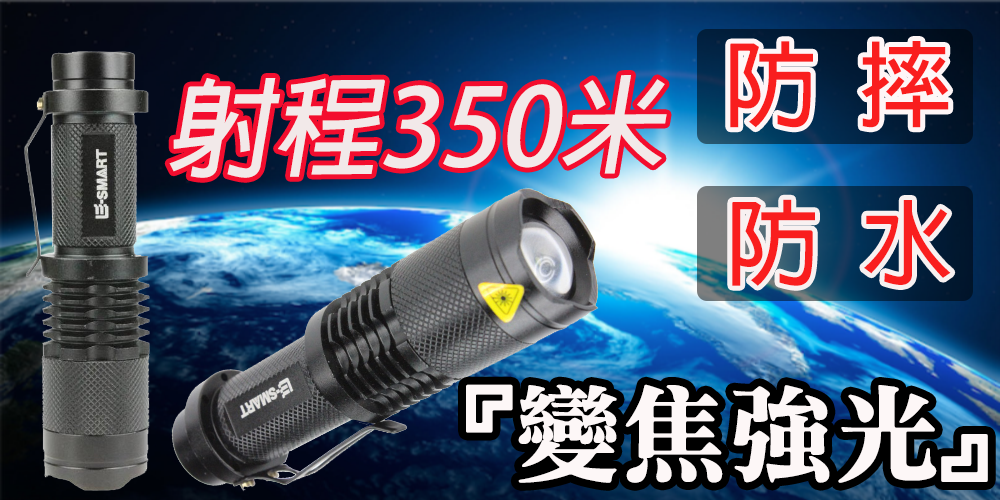
<style>
.page{position:relative;width:1000px;height:500px}
.page>*{position:absolute;margin:0}
.t1{font:93.3px "AdobeFanHeitiStd-Bold";color:#f91e1e}
.t2{font:106.6px "AdobeFanHeitiStd-Bold";color:#f2e9e9;font-style:italic}
.t3{font:106.6px "HanWangWCL02";color:#fdf7f7}
</style>
<div class="page">
<p class="t1" style="left:730px;top:41px;width:219px;height:87px">防  摔</p>
<p class="t2" style="left:169px;top:75px;width:498px;height:103px">射程350米</p>
<p class="t1" style="left:732px;top:199px;width:219px;height:87px">防  水</p>
<p class="t3" style="left:466px;top:384px;width:522px;height:99px">『變焦強光』</p>
</div>
